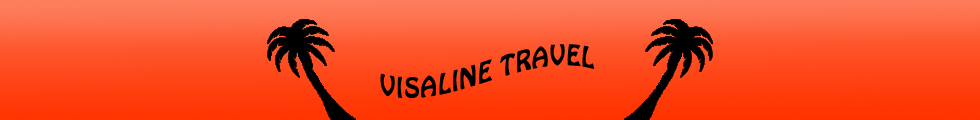
<style>
.page{position:relative;width:980px;height:120px}
.page>*{position:absolute;margin:0}
.t1{font:25px "HoboStd";color:#000000}
</style>
<div class="page">
<p class="t1" style="left:380px;top:44px;width:215px;height:54px;text-align:center">VISALINE TRAVEL</p>
</div>
